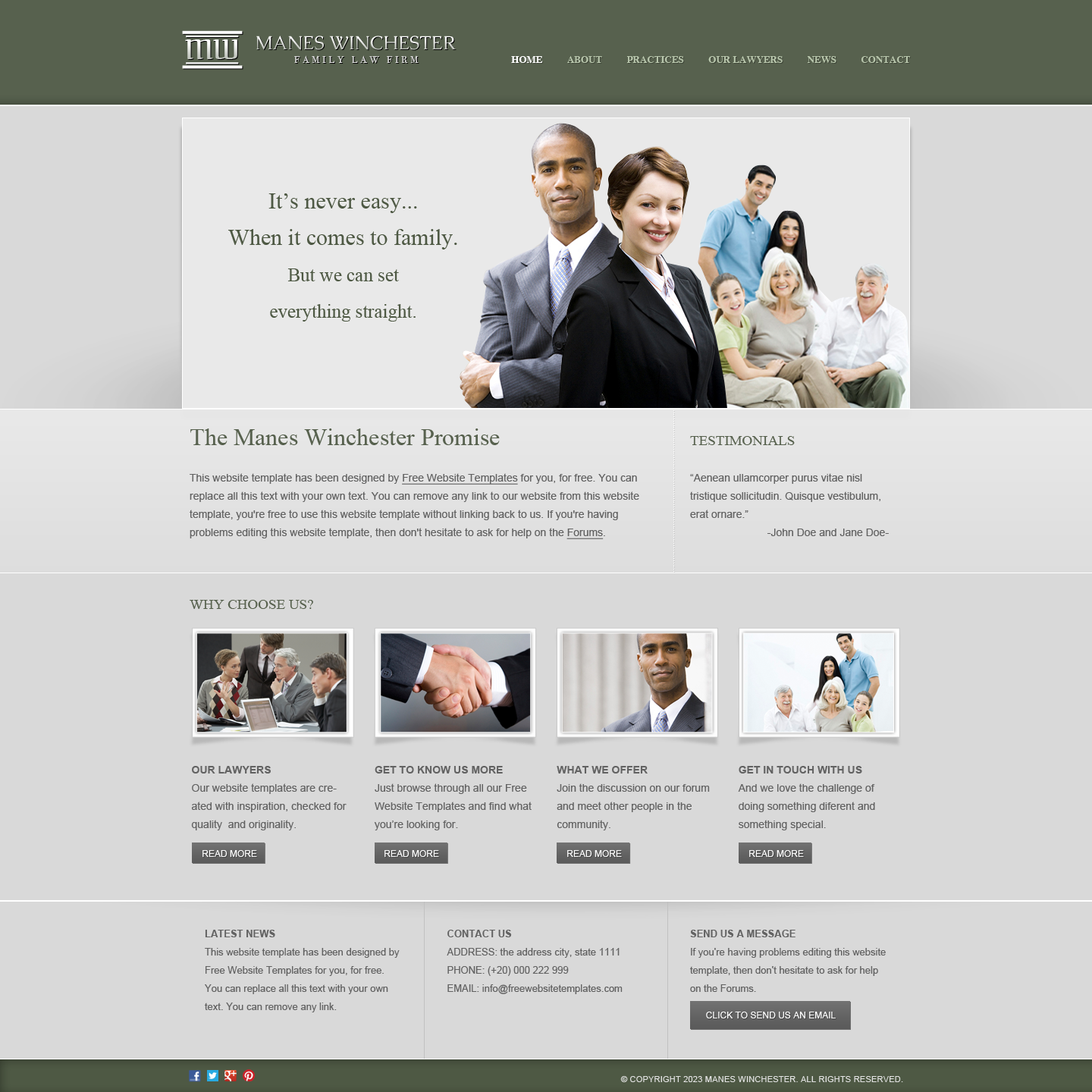
<style>
.page{position:relative;width:1092px;height:1092px;background:#d9d9d9}
.page>*{position:absolute;margin:0}
.t1{font:27.6px "Federant-Medium";text-transform:uppercase}
.t2{font:19px "Caudex";text-transform:uppercase}
.t3{font:10.1px "BodoniSvtyTwoITCTTBook";letter-spacing:0.3em;color:#dbdbdb;text-transform:uppercase}
.t4{font:9.9px "Times-Bold";color:#b8c6ac;text-transform:uppercase}
.t5{font:9.9px "Times-Bold";color:#ffffff;text-transform:uppercase}
.t6{font:22.7px/36.4px "TimesNewRomanPSMT";color:#4e5944}
.t7{font:19px/36.4px "TimesNewRomanPSMT";color:#4e5944}
.t8{font:6.2px "PTSans-Narrow";letter-spacing:0.2em;color:#ffffff}
.t9{font:10.6px/18.2px "ArialMT";color:#626262}
.t10{font:24.3px/18.2px "TimesNewRomanPSMT";color:#57614e}
.t11{font:10.6px/18.2px "ArialMT";color:#626262;text-decoration:underline}
.t12{font:14.4px/18.2px "TimesNewRomanPSMT";color:#57614e;text-transform:uppercase}
.t13{font:10.6px/18.2px "ArialMT";color:#626262;text-transform:uppercase}
.t14{font:14.4px "TimesNewRomanPSMT";color:#57614e;text-transform:uppercase}
.t15{font:10.6px/18.2px "Arial-BoldMT";color:#626262;text-transform:uppercase}
.t16{font:9.1px "ArialMT";color:#ffffff;text-transform:uppercase}
.t17{font:9.9px/18.2px "ArialMT";color:#626262}
.t18{font:9.9px/18.2px "Arial-BoldMT";color:#626262;text-transform:uppercase}
.t19{font:9.9px/22.7px "Arial-BoldMT";color:#626262;text-transform:uppercase}
.t20{font:8.3px "ArialMT";letter-spacing:0.02em;color:#e2e2e2;text-transform:uppercase}
</style>
<div class="page">
<p class="t1" style="left:185px;top:39px;width:52px;height:20px">Mw</p>
<p class="t2" style="left:256px;top:36px;width:200px;height:14px">Manes Winchester</p>
<p class="t3" style="left:294px;top:55px;width:125px;height:8px">Family Law Firm</p>
<p class="t4" style="left:511px;top:56px;width:399px;height:7px"><span class="t5">Home          </span>About          Practices          our lawyers          NEWS          Contact</p>
<p class="t6" style="left:228px;top:193px;width:229px;height:129px;text-align:center">It’s never easy...<br>When it comes to family.<br><span class="t7">But we can set<br>everything straight.</span></p>
<p class="t8" style="left:673px;top:410px;width:1px;height:162px;rotate:-90deg">............................................................................</p>
<p class="t9" style="left:190px;top:428px;width:449px;height:111px"><span class="t10">The Manes Winchester Promise<br><br></span>This website template has been designed by <span class="t11">Free Website Templates</span> for you, for free. You can replace all this text with your own text. You can remove any link to our website from this website template, you're free to use this website template without linking back to us. If you're having<br>problems editing this website template, then don't hesitate to ask for help on the <span class="t11">Forums</span>.</p>
<p class="t9" style="left:690px;top:436px;width:199px;height:100px"><span class="t12">Testimonials<br><br></span><span class="t13">“</span>Aenean ullamcorper purus vitae nisl tristique sollicitudin. Quisque vestibulum, erat ornare.”<br>-John Doe and Jane Doe-</p>
<p class="t14" style="left:190px;top:600px;width:123px;height:9px">Why Choose Us?</p>
<p class="t9" style="left:191px;top:766px;width:156px;height:64px"><span class="t15">Our lawyers<br></span>Our website templates are created with inspiration, checked for quality  and originality.</p>
<p class="t9" style="left:374px;top:766px;width:158px;height:64px"><span class="t15">get to know us more<br></span>Just browse through all our Free Website Templates and ﬁnd what you’re looking for.</p>
<p class="t9" style="left:557px;top:766px;width:153px;height:64px"><span class="t15">what we offer<br></span>Join the discussion on our forum and meet other people in the <br>community.</p>
<p class="t9" style="left:738px;top:766px;width:137px;height:64px"><span class="t15">get in touch with us<br></span>And we love the challenge of doing something diferent and something special.</p>
<p class="t16" style="left:202px;top:850px;width:55px;height:7px">Read More</p>
<p class="t16" style="left:384px;top:850px;width:55px;height:7px">Read More</p>
<p class="t16" style="left:567px;top:850px;width:55px;height:7px">Read More</p>
<p class="t16" style="left:749px;top:850px;width:55px;height:7px">Read More</p>
<p class="t17" style="left:205px;top:930px;width:195px;height:82px"><span class="t18">Latest news<br></span>This website template has been designed by Free Website Templates for you, for free.<br>You can replace all this text with your own text. You can remove any link.</p>
<p class="t17" style="left:447px;top:930px;width:176px;height:64px"><span class="t19">Contact Us<br></span>ADDRESS: the address city, state 1111<br>PHONE: (+20) 000 222 999<br>EMAIL: info@freewebsitetemplates.com</p>
<p class="t17" style="left:690px;top:930px;width:196px;height:62px"><span class="t18">SEND US A MESSAGE<br></span>If you're having problems editing this website template, then don't hesitate to ask for help on the Forums.</p>
<p class="t16" style="left:706px;top:1012px;width:130px;height:6px">Click to send us an email</p>
<p class="t20" style="left:620px;top:1076px;width:283px;height:6px">© COPYRIGHT 2023 MANES WINCHESTER. ALL RIGHTS RESERVED.</p>
</div>
